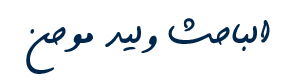
<style>
.page{position:relative;width:300px;height:80px;background:#ffffff}
.page>*{position:absolute;margin:0}
.t1{font:45.8px "Ghalam-2";color:#00264b}
</style>
<div class="page">
<p class="t1" style="left:26px;top:18px;width:244px;height:56px">الباحث وليد موحن</p>
</div>
